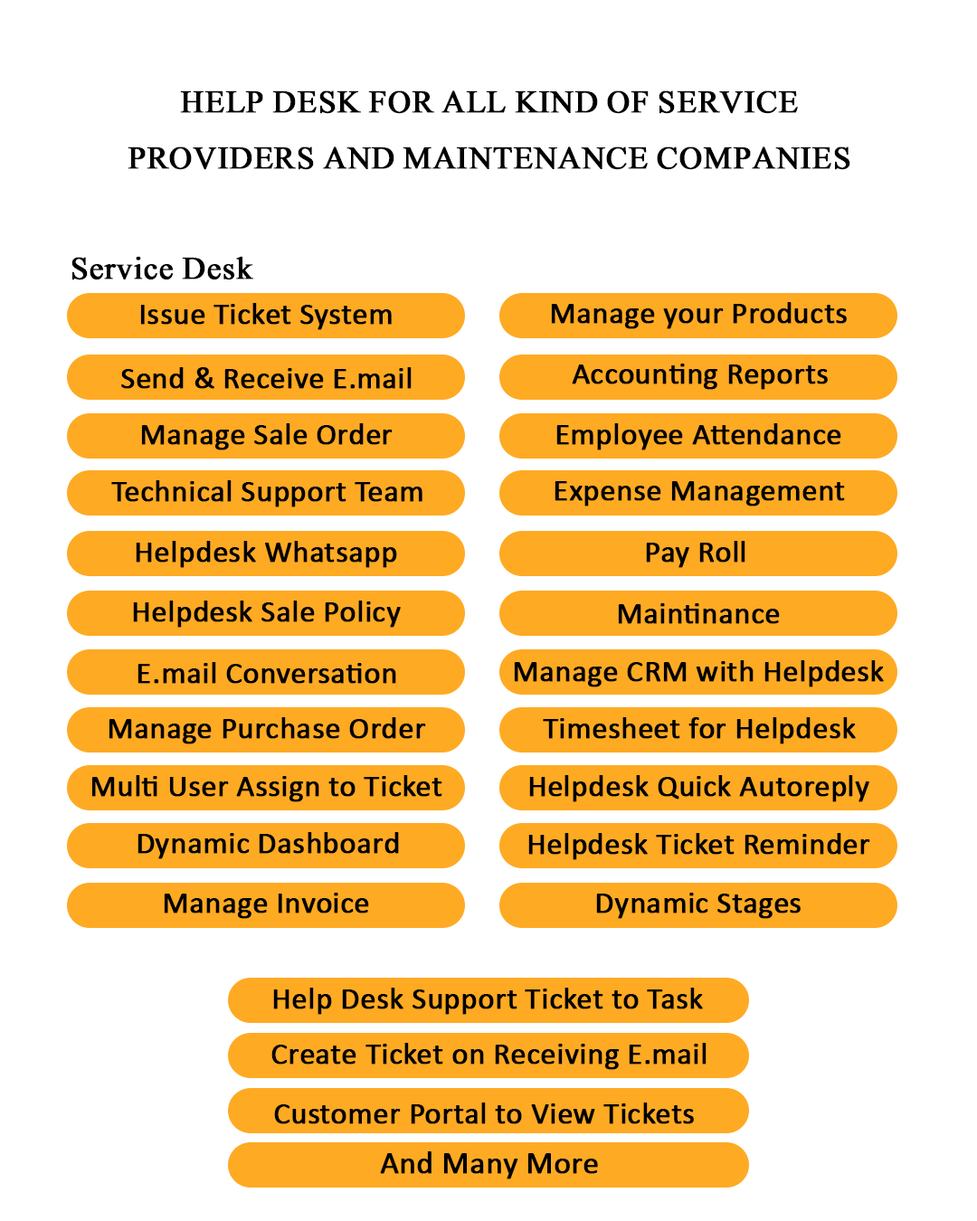
<style>
.page{position:relative;width:977px;height:1221px;background:#ffffff}
.page>*{position:absolute;margin:0}
.t1{font:38.6px/56.2px "Jameel-Noori-Nastaleeq";color:#000000;text-transform:uppercase;font-weight:bold}
.t2{font:38.6px "Jameel-Noori-Nastaleeq";color:#000000;font-weight:bold}
.t3{font:30.7px "Calibri";color:#000000;font-weight:bold}
.t4{font:31.7px "Calibri";color:#000000;font-weight:bold}
</style>
<div class="page">
<p class="t1" style="left:128px;top:90px;width:722px;height:80px;text-align:center">Help Desk for all kind of service<br>providers and maintenance companies</p>
<p class="t2" style="left:71px;top:256px;width:182px;height:24px">Service Desk</p>
<p class="t3" style="left:140px;top:303px;width:252px;height:27px">Issue Ticket System</p>
<p class="t3" style="left:551px;top:302px;width:295px;height:27px">Manage your Products</p>
<p class="t3" style="left:572px;top:364px;width:255px;height:26px">Accounting Reports</p>
<p class="t3" style="left:121px;top:367px;width:290px;height:22px">Send &amp; Receive E.mail</p>
<p class="t3" style="left:141px;top:423px;width:251px;height:27px">Manage Sale Order</p>
<p class="t3" style="left:556px;top:423px;width:285px;height:27px">Employee Attendance</p>
<p class="t3" style="left:111px;top:480px;width:311px;height:27px">Technical Support Team</p>
<p class="t3" style="left:554px;top:481px;width:291px;height:25px">Expense Management</p>
<p class="t3" style="left:136px;top:541px;width:261px;height:27px">Helpdesk Whatsapp</p>
<p class="t3" style="left:646px;top:541px;width:99px;height:27px">Pay Roll</p>
<p class="t3" style="left:133px;top:600px;width:268px;height:28px">Helpdesk Sale Policy</p>
<p class="t3" style="left:618px;top:603px;width:162px;height:21px">Maintinance</p>
<p class="t3" style="left:137px;top:662px;width:259px;height:22px">E.mail Conversation</p>
<p class="t3" style="left:514px;top:660px;width:370px;height:27px">Manage CRM with Helpdesk</p>
<p class="t3" style="left:109px;top:717px;width:317px;height:27px">Manage Purchase Order</p>
<p class="t3" style="left:543px;top:717px;width:313px;height:27px">Timesheet for Helpdesk</p>
<p class="t3" style="left:91px;top:775px;width:351px;height:27px">Multi User Assign to Ticket</p>
<p class="t3" style="left:529px;top:775px;width:340px;height:27px">Helpdesk Quick Autoreply</p>
<p class="t3" style="left:137px;top:832px;width:262px;height:27px">Dynamic Dashboard</p>
<p class="t3" style="left:528px;top:833px;width:342px;height:27px">Helpdesk Ticket Reminder</p>
<p class="t3" style="left:164px;top:893px;width:205px;height:26px">Manage Invoice</p>
<p class="t3" style="left:596px;top:893px;width:204px;height:26px">Dynamic Stages</p>
<p class="t3" style="left:273px;top:988px;width:430px;height:27px">Help Desk Support Ticket to Task</p>
<p class="t3" style="left:271px;top:1043px;width:435px;height:27px">Create Ticket on Receiving E.mail</p>
<p class="t3" style="left:274px;top:1102px;width:420px;height:22px">Customer Portal to View Tickets</p>
<p class="t4" style="left:380px;top:1151px;width:218px;height:28px">And Many More</p>
</div>
